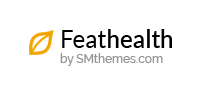
<style>
.page{position:relative;width:203px;height:86px;background:#ffffff}
.page>*{position:absolute;margin:0}
.t1{font:12px/15px "Raleway-Medium";color:#959494}
.t2{font:24.7px/19.7px "Lato-Regular";color:#000000}
.t3{font:24.7px/19.7px "Lato-Semibold";color:#000000}
</style>
<div class="page">
<p class="t1" style="left:60px;top:29px;width:112px;height:37px"><span class="t2">Feat</span><span class="t3">health<br></span>by SMthemes.com</p>
</div>
